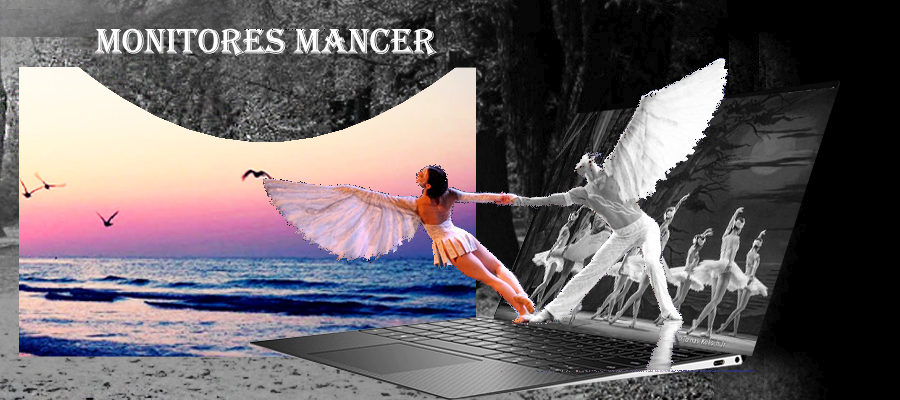
<style>
.page{position:relative;width:900px;height:400px}
.page>*{position:absolute;margin:0}
.t1{font:36px "Algerian";color:#ffffff}
</style>
<div class="page">
<p class="t1" style="left:94px;top:28px;width:343px;height:28px">monitores mancer</p>
</div>
